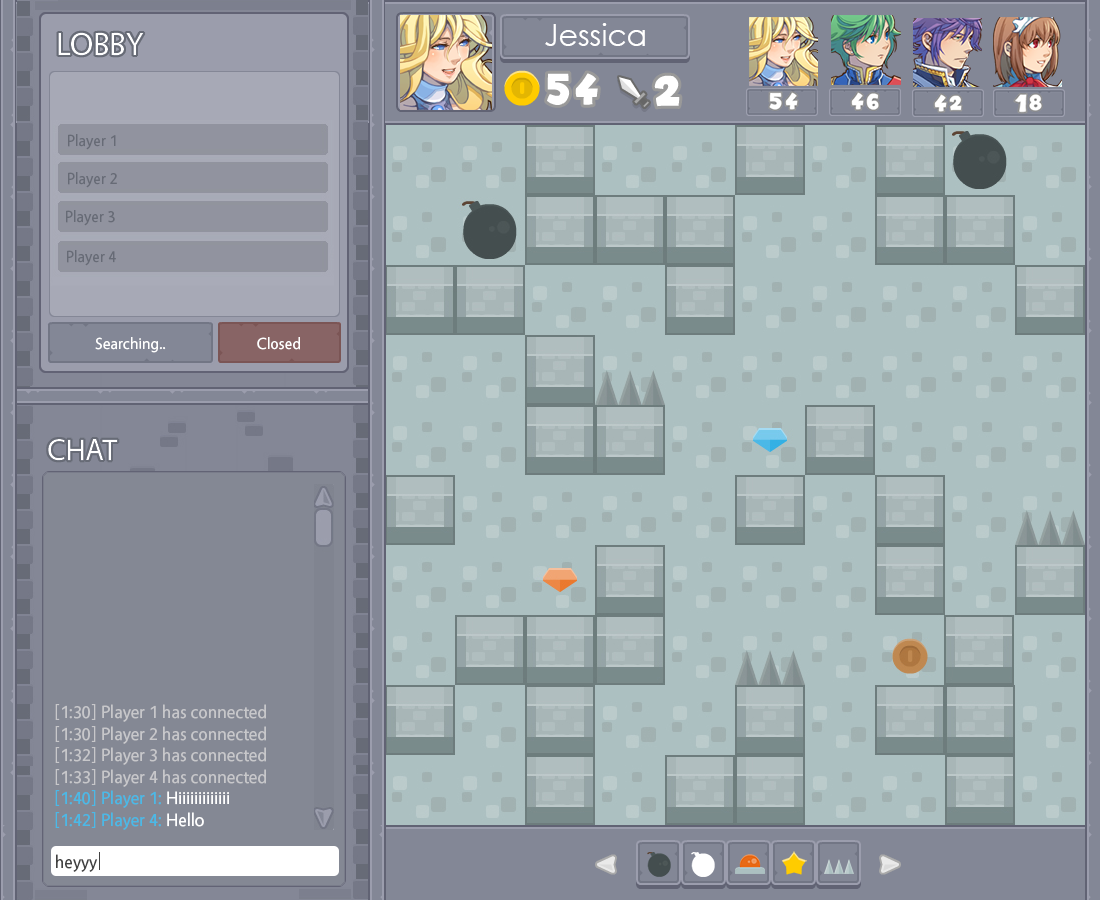
<style>
.page{position:relative;width:1100px;height:900px;background:#acc0c1}
.page>*{position:absolute;margin:0}
.t1{font:16px "Vegur-Regular";color:#676b76}
.t2{font:16px "Vegur-Regular";color:#ffffff}
.t3{font:18px "Vegur-Regular";color:#c7c7ca}
.t4{font:18px "Vegur-Regular";color:#4ab9e7}
.t5{font:18px "Vegur-Regular";color:#ffffff}
.t6{font:18px "Vegur-Regular";color:#424242}
</style>
<div class="page">
<p class="t1" style="left:68px;top:134px;width:48px;height:16px">Player 1</p>
<p class="t1" style="left:68px;top:172px;width:49px;height:16px">Player 2</p>
<p class="t1" style="left:66px;top:210px;width:49px;height:16px">Player 3</p>
<p class="t1" style="left:67px;top:250px;width:49px;height:16px">Player 4</p>
<p class="t2" style="left:95px;top:337px;width:71px;height:16px">Searching..</p>
<p class="t2" style="left:257px;top:337px;width:43px;height:13px">Closed</p>
<p class="t3" style="left:55px;top:704px;width:211px;height:126px">[1:30] Player 1 has connected<br>[1:30] Player 2 has connected<br>[1:32] Player 3 has connected<br>[1:33] Player 4 has connected<br><span class="t4">[1:40] Player 1: </span><span class="t5">Hiiiiiiiiiiiii<br></span><span class="t4">[1:42] Player 4: </span><span class="t5">Hello</span></p>
<p class="t6" style="left:56px;top:854px;width:42px;height:18px">heyyy</p>
</div>
